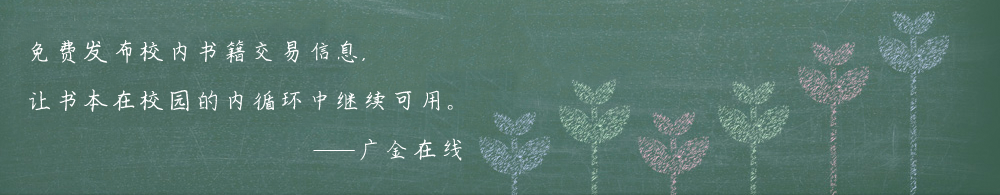
<style>
.page{position:relative;width:1000px;height:195px}
.page>*{position:absolute;margin:0}
.t1{font:28px "ÊéÌå·»¹ùÐ¡Óï¸Ö±Ê¿¬Ìå";color:#ffffff}
</style>
<div class="page">
<p class="t1" style="left:29px;top:40px;width:433px;height:121px">免费发布校内书籍交易信息，<br>让书本在校园的内循环中继续可用。<br>        ——广金在线</p>
</div>
